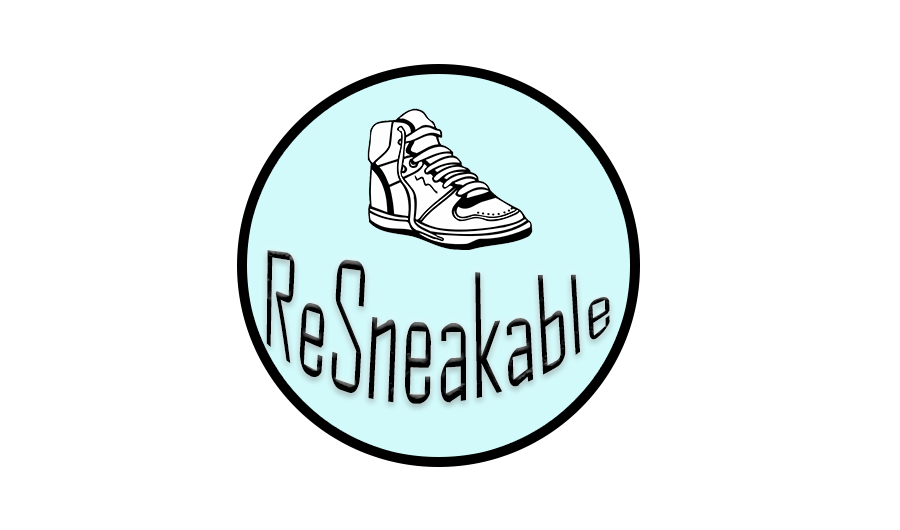
<style>
.page{position:relative;width:900px;height:530px;background:#ffffff}
.page>*{position:absolute;margin:0}
.t1{font:88px "AgencyFB-Reg";color:#000000}
</style>
<div class="page">
<p class="t1" style="left:266px;top:250px;width:344px;height:154px;text-align:center">ReSneakable</p>
</div>
